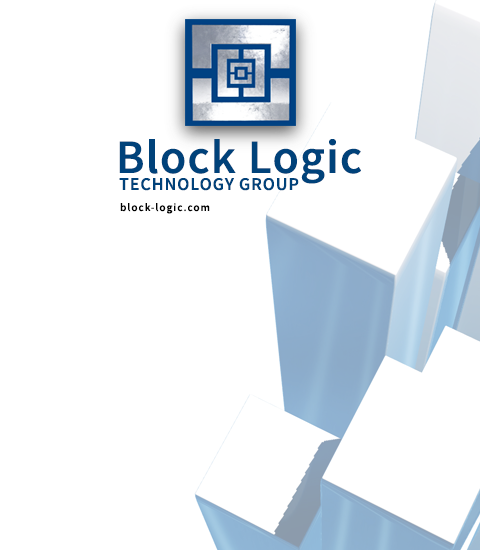
<style>
.page{position:relative;width:480px;height:550px;background:#ffffff}
.page>*{position:absolute;margin:0}
.t1{font:48px "SourceSansRoman-Semibold";letter-spacing:0.025em;color:#00427a}
.t2{font:18px "SourceSansRoman-Semibold";letter-spacing:0.05em;color:#00427a}
.t3{font:11px "SourceSansRoman-Semibold";letter-spacing:0.1em;color:#000000}
</style>
<div class="page">
<p class="t1" style="left:119px;top:139px;width:242px;height:45px">Block Logic</p>
<p class="t2" style="left:119px;top:178px;width:180px;height:13px">TECHNOLOGY GROUP</p>
<p class="t3" style="left:120px;top:203px;width:90px;height:11px">block-logic.com</p>
</div>
